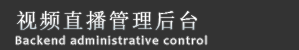
<style>
.page{position:relative;width:299px;height:50px;background:#333333}
.page>*{position:absolute;margin:0}
.t1{font:21px "SimSun";letter-spacing:0.1em;color:#ffffff}
.t2{font:12px "Candara";letter-spacing:0.1em;color:#ffffff}
</style>
<div class="page">
<p class="t1" style="left:16px;top:11px;width:181px;height:19px">视频直播管理后台</p>
<p class="t2" style="left:16px;top:35px;width:191px;height:10px">Backend administrative control</p>
</div>
